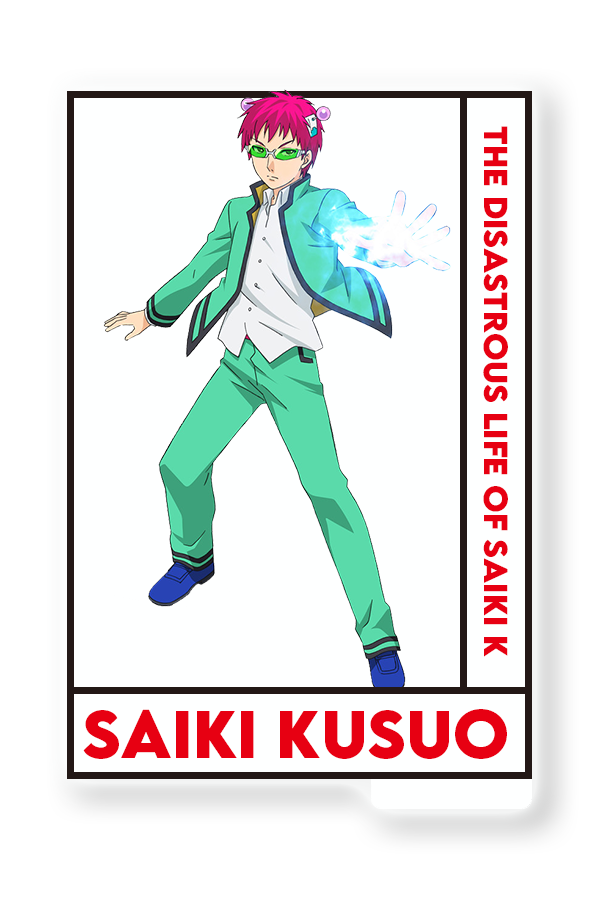
<style>
.page{position:relative;width:600px;height:900px;background:#feffff}
.page>*{position:absolute;margin:0}
.t1{font:29.6px "LEMONMILK-Bold";color:#e70012}
.t2{font:60.3px "LEMONMILK-Bold";color:#e70012}
</style>
<div class="page">
<p class="t1" style="left:483px;top:126px;width:25px;height:531px;rotate:90deg">THE disastrous Life of saiki K</p>
<p class="t2" style="left:83px;top:709px;width:424px;height:50px">Saiki Kusuo</p>
</div>
